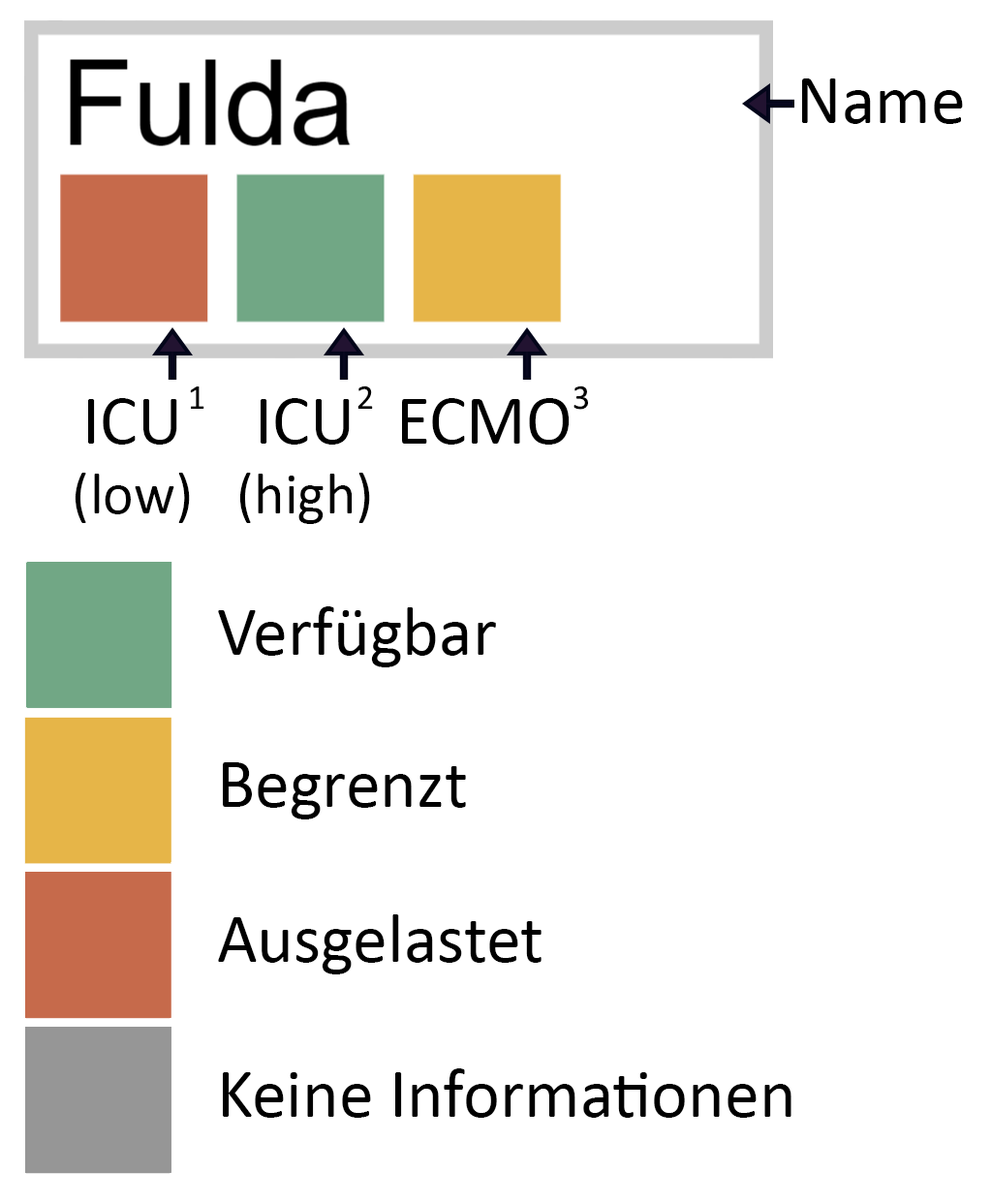
<style>
.page{position:relative;width:992px;height:1203px;background:#ffffff}
.page>*{position:absolute;margin:0}
.t1{font:69.7px "Calibri";color:#000000}
.t2{font:34.9px "Calibri";color:#000000}
.t3{font:58.1px "Calibri";color:#000000}
</style>
<div class="page">
<p class="t1" style="left:802px;top:78px;width:160px;height:46px">Name</p>
<p class="t2" style="left:190px;top:386px;width:14px;height:23px">1</p>
<p class="t2" style="left:357px;top:385px;width:16px;height:24px">2</p>
<p class="t2" style="left:573px;top:385px;width:15px;height:25px">3</p>
<p class="t3" style="left:75px;top:398px;width:115px;height:125px;text-align:center"><span class="t1">ICU<br></span>(low)</p>
<p class="t3" style="left:239px;top:398px;width:131px;height:126px;text-align:center"><span class="t1">ICU<br></span>(high)</p>
<p class="t1" style="left:402px;top:398px;width:167px;height:46px">ECMO</p>
<p class="t1" style="left:218px;top:606px;width:278px;height:61px">Verfügbar</p>
<p class="t1" style="left:223px;top:762px;width:243px;height:57px">Begrenzt</p>
<p class="t1" style="left:218px;top:914px;width:323px;height:60px">Ausgelastet</p>
<p class="t1" style="left:223px;top:1068px;width:568px;height:49px">Keine Informationen</p>
</div>
